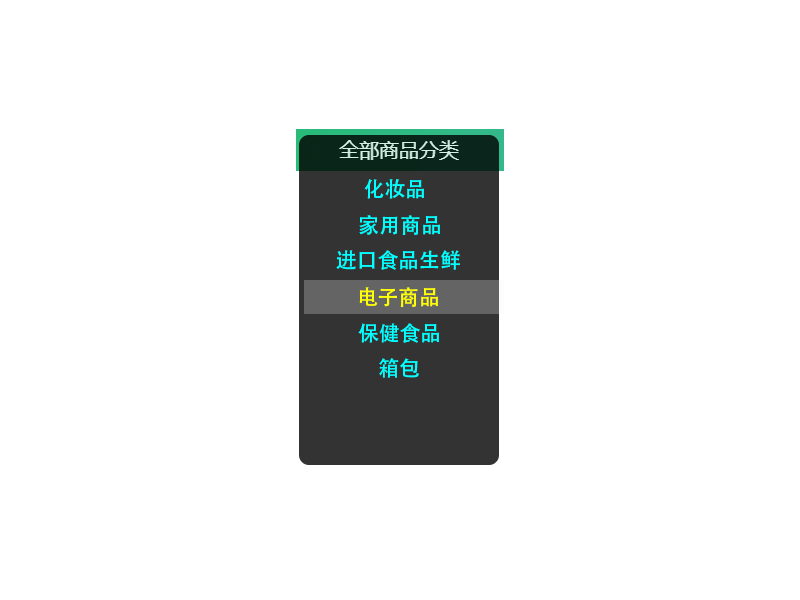
<style>
.page{position:relative;width:800px;height:600px;background:#ffffff}
.page>*{position:absolute;margin:0}
.t1{font:20.8px "AdobeHeitiStd-Regular";color:#00ffff}
.t2{font:20.8px "AdobeHeitiStd-Regular";color:#ffff00}
</style>
<div class="page">
<p class="t1" style="left:364px;top:179px;width:60px;height:20px">化妆品</p>
<p class="t1" style="left:359px;top:215px;width:81px;height:20px">家用商品</p>
<p class="t1" style="left:336px;top:250px;width:124px;height:20px">进口食品生鲜</p>
<p class="t2" style="left:359px;top:287px;width:79px;height:20px">电子商品</p>
<p class="t1" style="left:358px;top:323px;width:81px;height:20px">保健食品</p>
<p class="t1" style="left:379px;top:358px;width:40px;height:20px">箱包</p>
</div>
